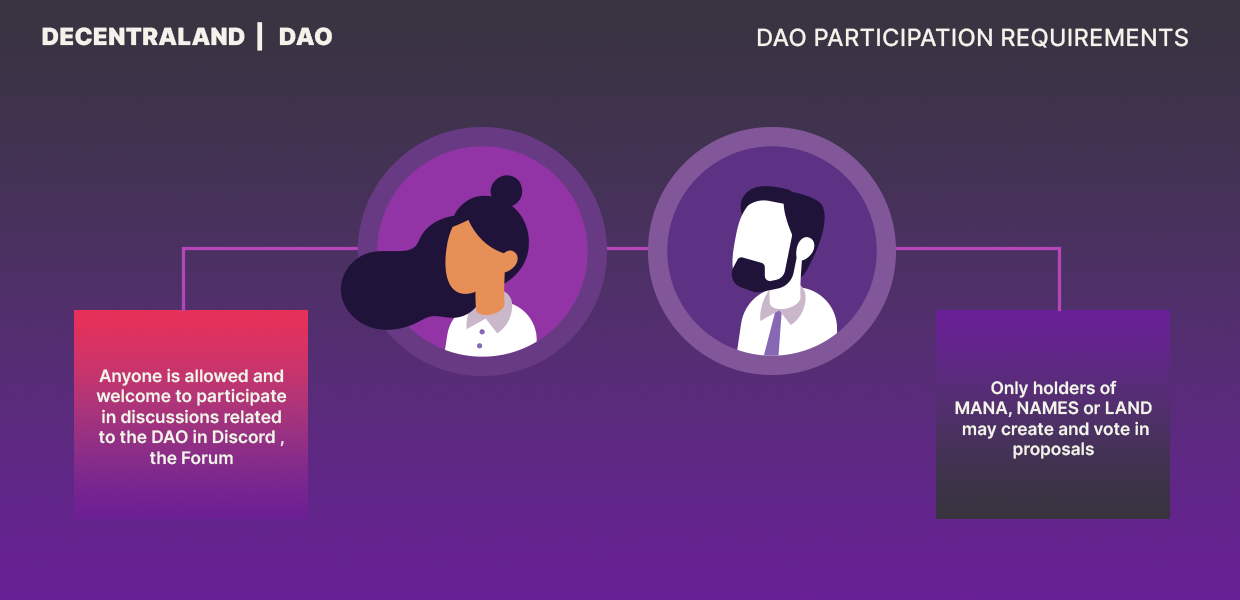
<style>
.page{position:relative;width:1240px;height:600px}
.page>*{position:absolute;margin:0}
.t1{font:23.8px "Inter-Black";color:#f3f2eb;text-transform:uppercase}
.t2{font:23.8px "Inter-Medium";color:#f3f2eb;text-transform:uppercase}
.t3{font:17.2px "Inter-SemiBold";color:#f3f2eb}
</style>
<div class="page">
<p class="t1" style="left:42px;top:22px;width:290px;height:29px">decentraland  |   DAO</p>
<p class="t2" style="left:757px;top:28px;width:431px;height:20px">DAO Participation Requirements</p>
<p class="t3" style="left:96px;top:368px;width:191px;height:97px;text-align:center">Anyone is allowed and welcome to participate in discussions related to the DAO in Discord , the Forum</p>
<p class="t3" style="left:955px;top:380px;width:197px;height:79px;text-align:center">Only holders of <br>MANA, NAMES or LAND<br> may create and vote in proposals</p>
</div>
